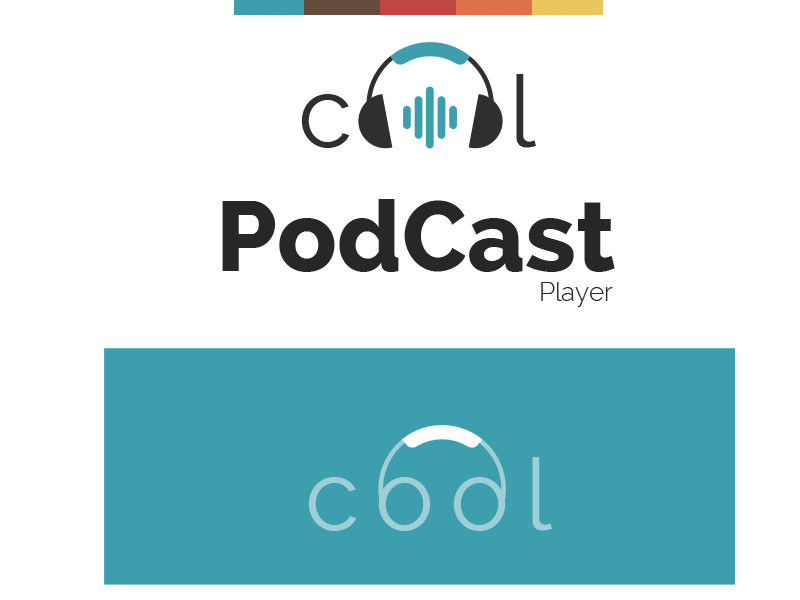
<style>
.page{position:relative;width:800px;height:600px;background:#ffffff}
.page>*{position:absolute;margin:0}
.t1{font:99.3px "Raleway";letter-spacing:0.05em;color:#2f2f2f}
.t2{font:98.5px "Raleway-ExtraBold";color:#272727}
.t3{font:25.6px "Raleway-Light";color:#272727}
.t4{font:99.3px "Raleway";letter-spacing:0.16em;color:#9ecfd7}
</style>
<div class="page">
<p class="t1" style="left:301px;top:74px;width:235px;height:74px">c     l</p>
<p class="t2" style="left:222px;top:199px;width:393px;height:73px">PodCast</p>
<p class="t3" style="left:541px;top:282px;width:72px;height:25px">Player</p>
<p class="t4" style="left:308px;top:457px;width:244px;height:74px">cool</p>
</div>
